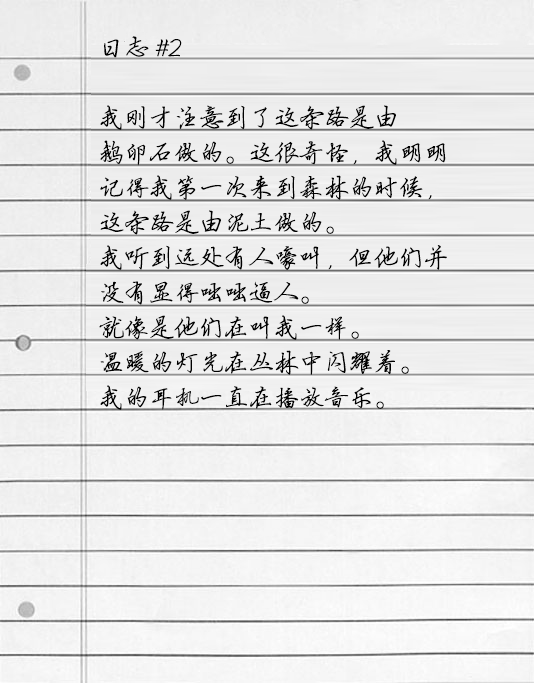
<style>
.page{position:relative;width:534px;height:683px}
.page>*{position:absolute;margin:0}
.t1{font:25px/35px "FZYBXSJW--GB1-0";color:#000000}
</style>
<div class="page">
<p class="t1" style="left:99px;top:36px;width:348px;height:374px">日志 #2<br><br>我刚才注意到了这条路是由<br>鹅卵石做的。这很奇怪，我明明<br>记得我第一次来到森林的时候，<br>这条路是由泥土做的。<br>我听到远处有人嚎叫，但他们并<br>没有显得咄咄逼人。<br>就像是他们在叫我一样。<br>温暖的灯光在丛林中闪耀着。<br>我的耳机一直在播放音乐。</p>
</div>
